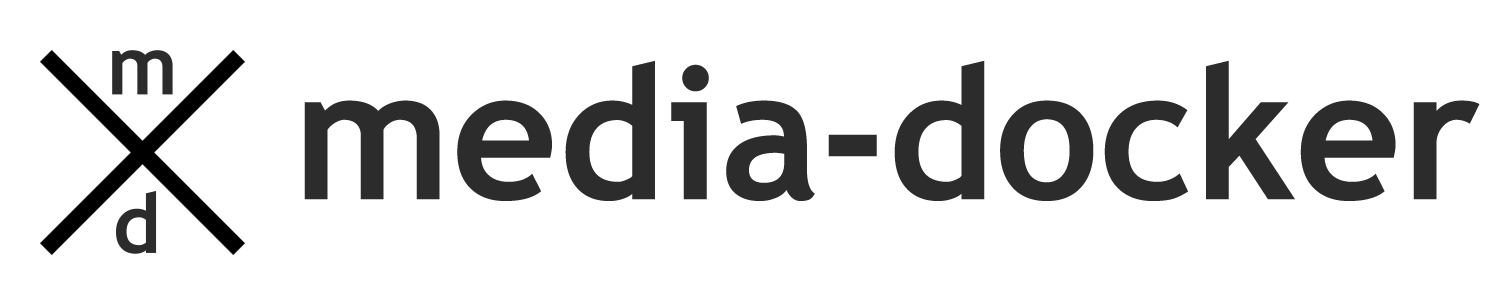
<style>
.page{position:relative;width:1500px;height:300px;background:#ffffff}
.page>*{position:absolute;margin:0}
.t1{font:185px "TrebuchetMS-Bold";color:#2c2c2c}
</style>
<div class="page">
<p class="t1" style="left:304px;top:60px;width:1176px;height:141px">media-docker</p>
</div>
